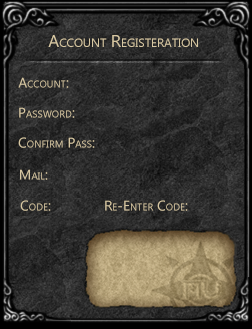
<style>
.page{position:relative;width:252px;height:329px}
.page>*{position:absolute;margin:0}
.t1{font:17px "LaoUI";color:#d7c7a2;font-variant:small-caps}
.t2{font:14px "LaoUI";color:#d7c7a2;font-variant:small-caps}
</style>
<div class="page">
<p class="t1" style="left:48px;top:35px;width:150px;height:12px">Account Registeration</p>
<p class="t2" style="left:18px;top:77px;width:51px;height:11px">:Account</p>
<p class="t2" style="left:19px;top:107px;width:56px;height:11px">:Password</p>
<p class="t2" style="left:18px;top:137px;width:77px;height:11px">:Confirm Pass</p>
<p class="t2" style="left:20px;top:169px;width:28px;height:11px">:Mail</p>
<p class="t2" style="left:20px;top:200px;width:31px;height:11px">:Code</p>
<p class="t2" style="left:105px;top:200px;width:83px;height:11px">:Re-Enter Code</p>
</div>
